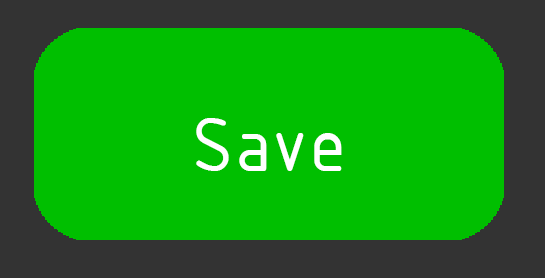
<style>
.page{position:relative;width:545px;height:278px;background:#00bf00}
.page>*{position:absolute;margin:0}
.t1{font:75px "GOST-Common";color:#ffffff}
</style>
<div class="page">
<p class="t1" style="left:196px;top:118px;width:146px;height:53px">Save</p>
</div>
